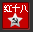
<style>
.page{position:relative;width:33px;height:32px;background:#c50000}
.page>*{position:absolute;margin:0}
.t1{font:10.4px "SimSun";letter-spacing:-0.25em;color:#ffffff}
</style>
<div class="page">
<p class="t1" style="left:4px;top:4px;width:24px;height:9px">红十八</p>
</div>
